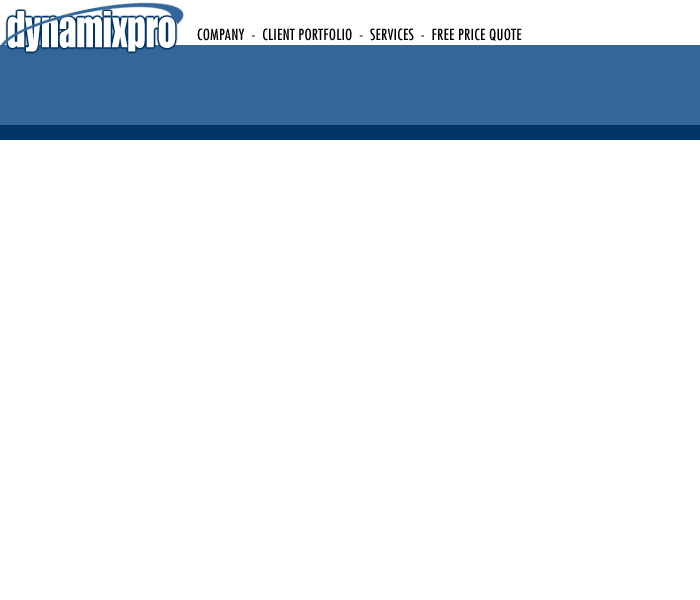
<style>
.page{position:relative;width:700px;height:600px;background:#ffffff}
.page>*{position:absolute;margin:0}
.t1{font:50.7px "Impact";color:#ffffff;scale:0.77 1}
.t2{font:15px "Futura-Condensed";letter-spacing:0.02em;color:#000000}
</style>
<div class="page">
<p class="t1" style="left:7px;top:11px;width:169px;height:41px">dynamixpro</p>
<p class="t2" style="left:197px;top:28px;width:325px;height:13px">COMPANY  -  CLIENT PORTFOLIO  -  SERVICES  -  FREE PRICE QUOTE</p>
</div>
